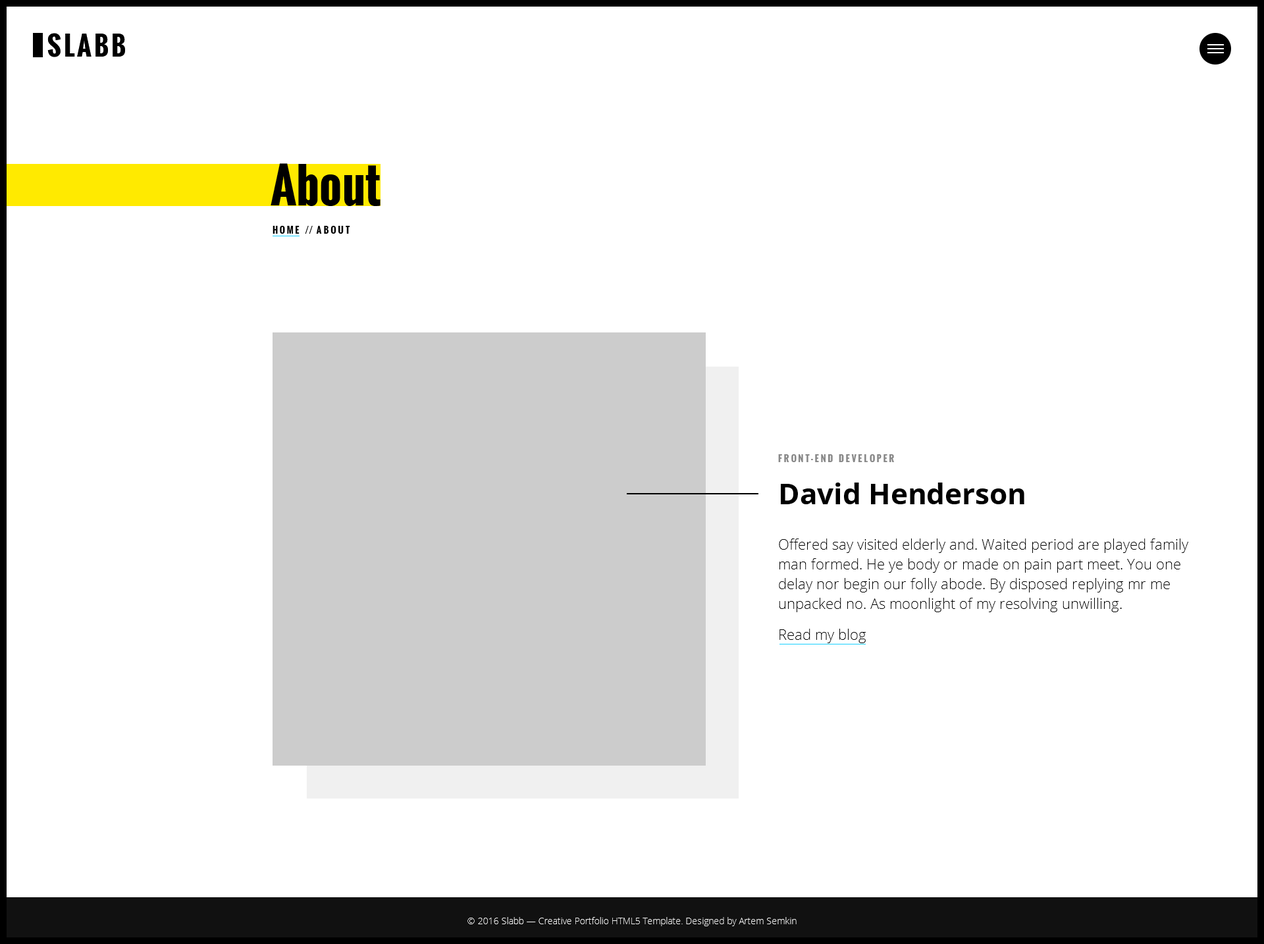
<style>
.page{position:relative;width:1264px;height:944px;background:#ffffff}
.page>*{position:absolute;margin:0}
.t1{font:47.4px "Oswald-Bold";color:#000000}
.t2{font:9.2px "Oswald-Bold";letter-spacing:0.2em;color:#000000;text-transform:uppercase}
.t3{font:9.2px "Oswald-Bold";color:#000000;text-transform:uppercase}
.t4{font:9.2px "Oswald-Bold";letter-spacing:0.2em;color:#888888;text-transform:uppercase}
.t5{font:29px "OpenSans-Bold";color:#000000}
.t6{font:14.5px/19.7px "OpenSans-Light";color:#000000}
.t7{font:14.5px "OpenSans-Light";color:#000000}
</style>
<div class="page">
<p class="t1" style="left:270px;top:163px;width:110px;height:43px">About</p>
<p class="t2" style="left:272px;top:226px;width:78px;height:8px">Home <span class="t3">//</span> About</p>
<p class="t4" style="left:778px;top:454px;width:116px;height:8px">Front-end developer</p>
<p class="t5" style="left:781px;top:482px;width:243px;height:22px">David Henderson</p>
<p class="t6" style="left:779px;top:538px;width:409px;height:74px">Offered say visited elderly and. Waited period are played family man formed. He ye body or made on pain part meet. You one delay nor begin our folly abode. By disposed replying mr me unpacked no. As moonlight of my resolving unwilling.</p>
<p class="t7" style="left:779px;top:628px;width:86px;height:15px">Read my blog</p>
</div>
